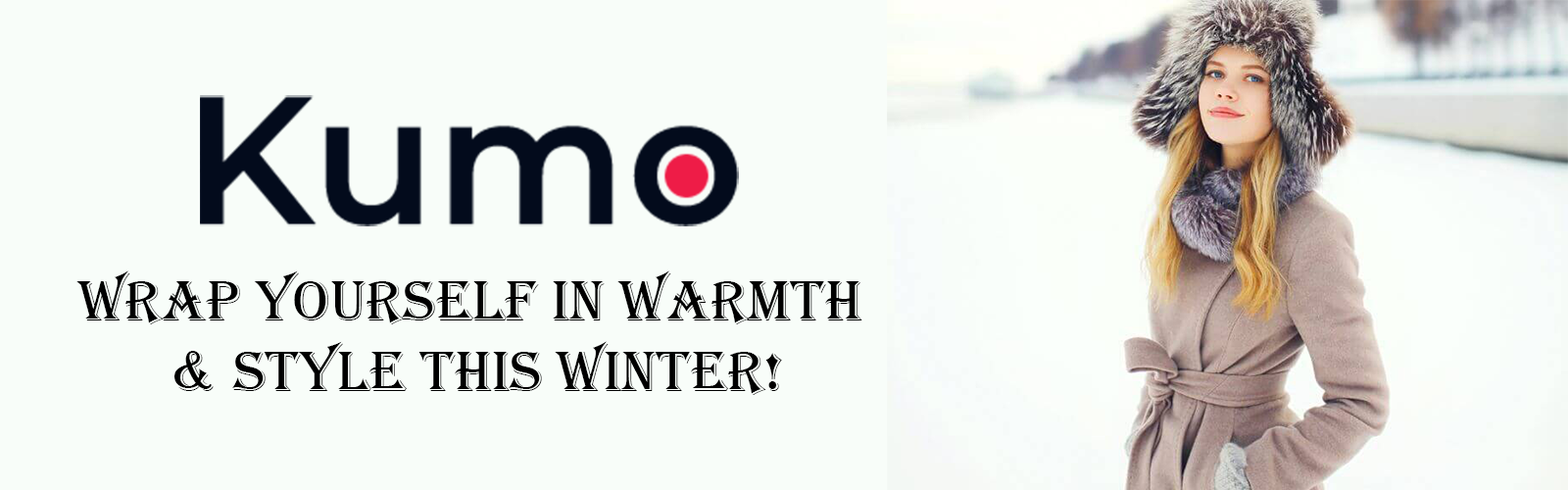
<style>
.page{position:relative;width:1568px;height:490px;background:#f8fdf9}
.page>*{position:absolute;margin:0}
.t1{font:58.8px "Algerian";color:#000000}
</style>
<div class="page">
<p class="t1" style="left:76px;top:270px;width:786px;height:125px;text-align:center">Wrap Yourself in Warmth <br>&amp; Style This Winter!</p>
</div>
